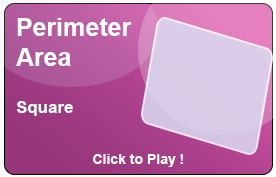
<style>
.page{position:relative;width:276px;height:177px}
.page>*{position:absolute;margin:0}
.t1{font:25px "Arial-BoldMT";color:#ffffff}
.t2{font:17px "Arial-BoldMT";color:#ffffff}
.t3{font:14px "Arial-BoldMT";color:#ffffff}
</style>
<div class="page">
<p class="t1" style="left:16px;top:18px;width:116px;height:48px">Perimeter <br>Area</p>
<p class="t2" style="left:16px;top:101px;width:57px;height:15px">Square</p>
<p class="t3" style="left:93px;top:154px;width:90px;height:13px">Click to Play !</p>
</div>
